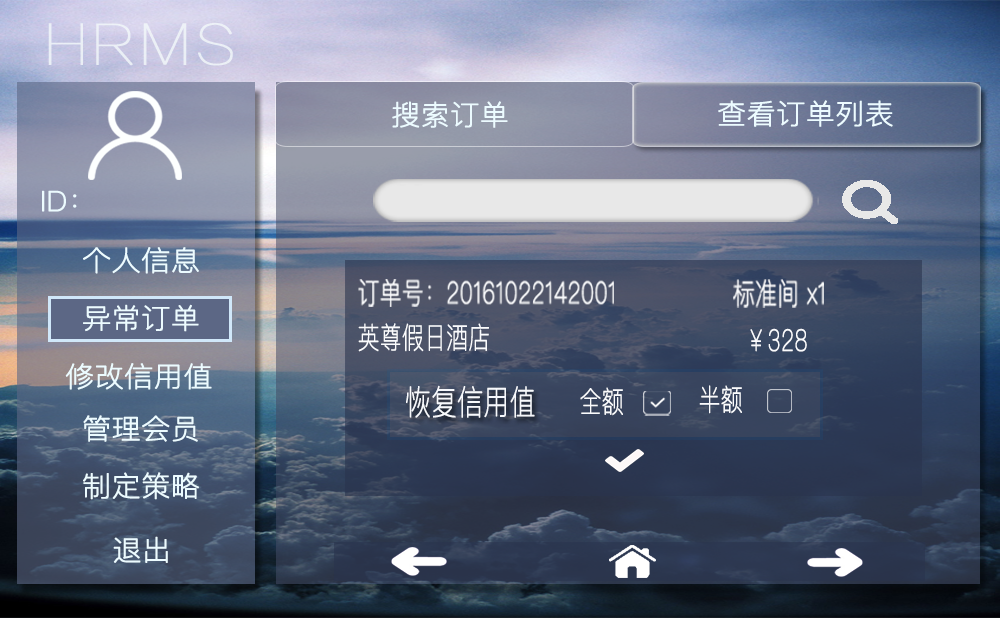
<style>
.page{position:relative;width:1000px;height:618px}
.page>*{position:absolute;margin:0}
.t1{font:27.8px "PingFangSC-Thin";color:#ecfbff;font-weight:bold;scale:1.04 1}
.t2{font:29.2px "PingFangSC-Ultralight";color:#fafbfd;font-weight:bold;scale:0.74 1}
.t3{font:33.7px "PingFangSC-Ultralight";color:#fafbfd;font-weight:bold;scale:0.76 1}
</style>
<div class="page">
<p class="t1" style="left:392px;top:101px;width:116px;height:27px">搜索订单</p>
<p class="t1" style="left:718px;top:100px;width:175px;height:27px">查看订单列表</p>
<p class="t1" style="left:42px;top:190px;width:35px;height:22px">ID：</p>
<p class="t1" style="left:83px;top:247px;width:116px;height:27px">个人信息</p>
<p class="t2" style="left:358px;top:279px;width:256px;height:28px">订单号：20161022142001</p>
<p class="t2" style="left:733px;top:279px;width:91px;height:29px">标准间 x1</p>
<p class="t1" style="left:83px;top:304px;width:116px;height:28px">异常订单</p>
<p class="t2" style="left:358px;top:323px;width:131px;height:29px">英尊假日酒店</p>
<p class="t2" style="left:750px;top:328px;width:57px;height:24px">￥328</p>
<p class="t1" style="left:65px;top:363px;width:147px;height:27px">修改信用值</p>
<p class="t3" style="left:406px;top:385px;width:129px;height:33px">恢复信用值</p>
<p class="t2" style="left:580px;top:387px;width:43px;height:29px">全额</p>
<p class="t2" style="left:699px;top:385px;width:43px;height:29px">半额</p>
<p class="t1" style="left:83px;top:415px;width:115px;height:27px">管理会员</p>
<p class="t1" style="left:83px;top:472px;width:116px;height:28px">制定策略</p>
<p class="t1" style="left:113px;top:536px;width:55px;height:27px">退出</p>
</div>
